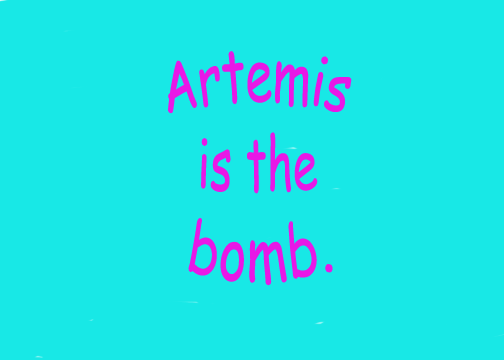
<style>
.page{position:relative;width:504px;height:360px;background:#18e8e6}
.page>*{position:absolute;margin:0}
.t1{font:60px "ComicSansMS";color:#e818e6}
</style>
<div class="page">
<p class="t1" style="left:168px;top:51px;width:184px;height:235px">Artemis<br>  is the <br>  bomb.</p>
</div>
